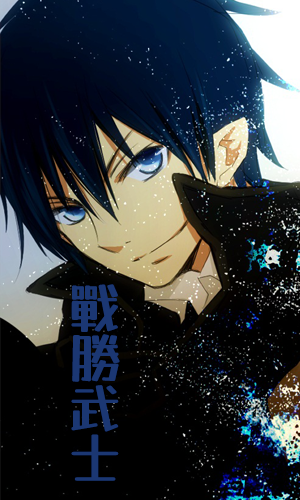
<style>
.page{position:relative;width:300px;height:500px}
.page>*{position:absolute;margin:0}
.t1{font:54.2px/50px "YuseiMagic-Regular";letter-spacing:-0.05em;color:#102e6c}
</style>
<div class="page">
<p class="t1" style="left:71px;top:284px;width:49px;height:197px;text-align:center">戰<br>勝<br>武<br>士</p>
</div>
